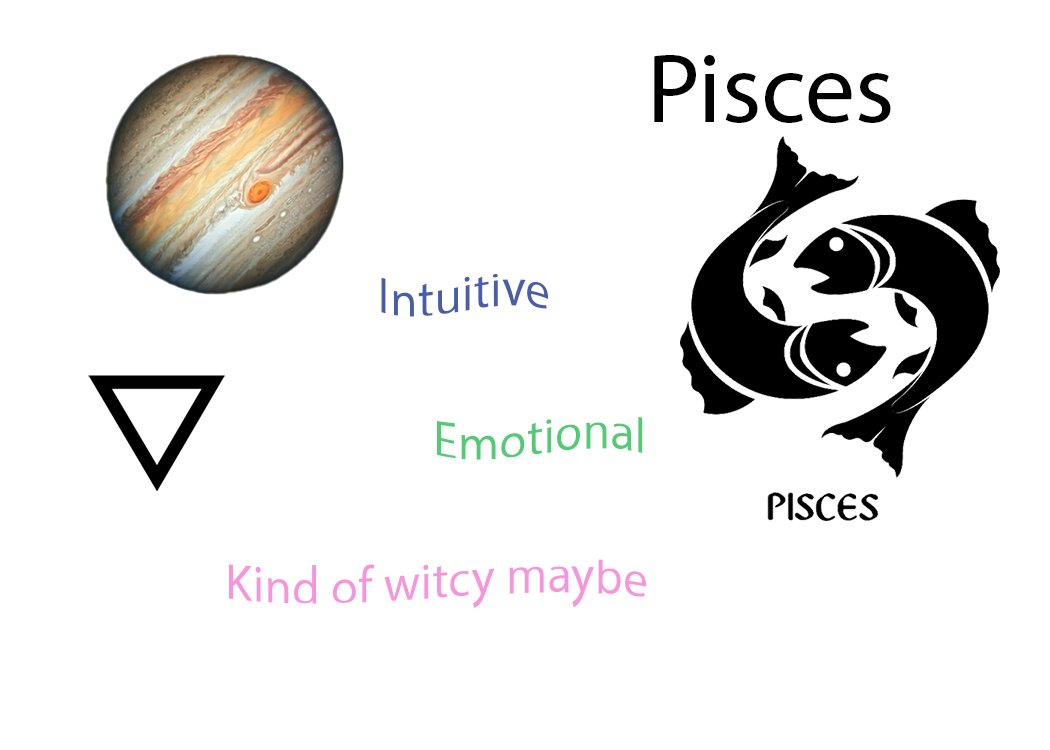
<style>
.page{position:relative;width:1050px;height:750px;background:#ffffff}
.page>*{position:absolute;margin:0}
.t1{font:100px "MyriadPro-Regular";color:#000000}
.t2{font:50px "MyriadPro-Regular";color:#495da9}
.t3{font:50px "MyriadPro-Regular";color:#55ca76}
.t4{font:50px "MyriadPro-Regular";color:#f696da}
</style>
<div class="page">
<p class="t1" style="left:654px;top:55px;width:237px;height:68px">Pisces</p>
<p class="t2" style="left:381px;top:274px;width:168px;height:43px">Intuitive</p>
<p class="t3" style="left:437px;top:417px;width:206px;height:43px">Emotional</p>
<p class="t4" style="left:229px;top:559px;width:418px;height:49px">Kind of witcy maybe</p>
</div>
